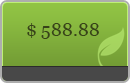
<style>
.page{position:relative;width:130px;height:83px}
.page>*{position:absolute;margin:0}
.t1{font:18px "Georgia";color:#374219}
</style>
<div class="page">
<p class="t1" style="left:27px;top:23px;width:72px;height:16px">$ 588.88</p>
</div>
